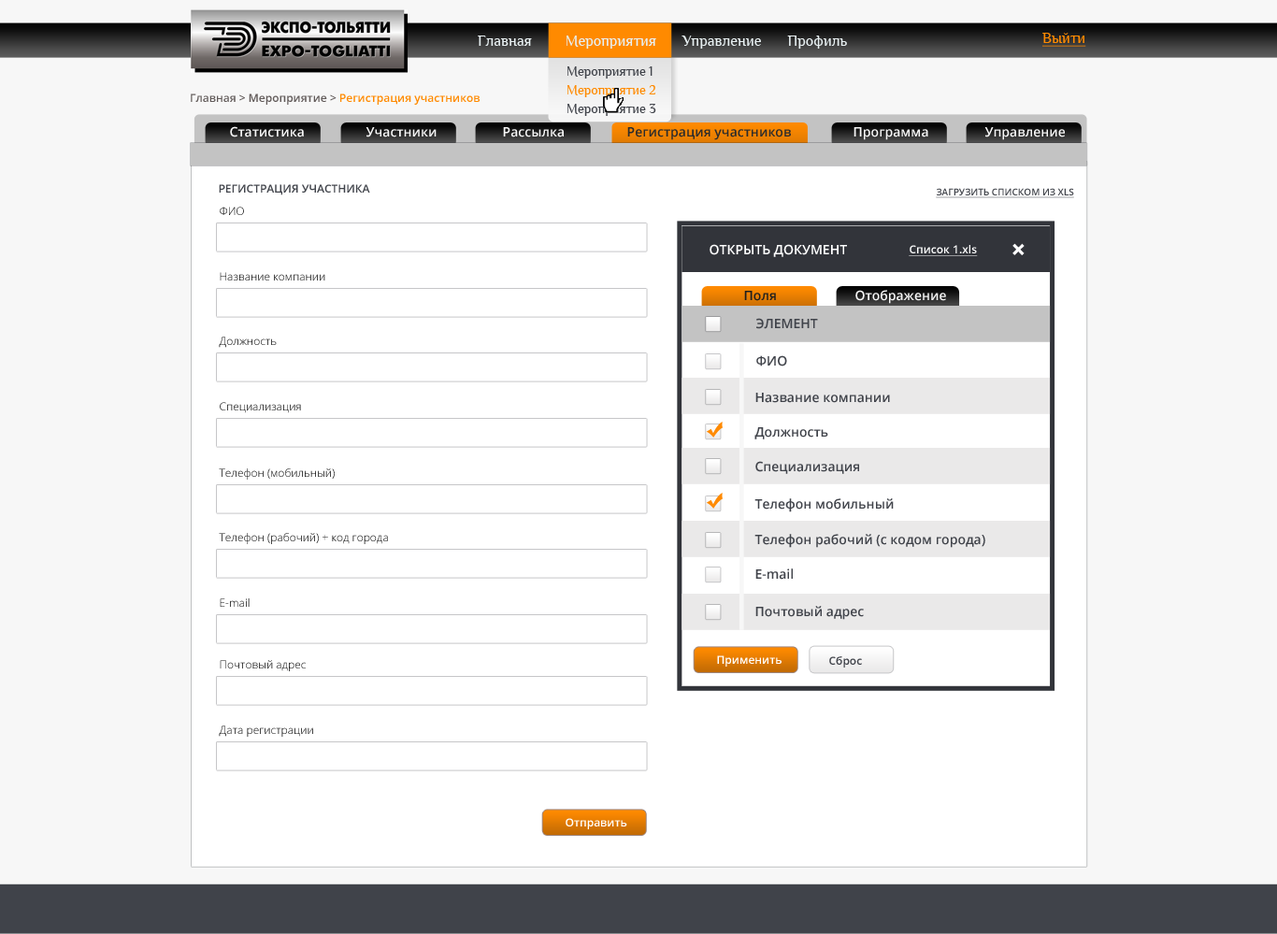
<style>
.page{position:relative;width:1277px;height:934px;background:#ffffff}
.page>*{position:absolute;margin:0}
.t1{font:15.4px "Philosopher";color:#e7eff1}
.t2{font:15px "Philosopher";color:#ff8a00;text-decoration:underline}
.t3{font:13.5px/18.7px "Philosopher";color:#40434a}
.t4{font:13.5px/18.7px "Philosopher";color:#ff8a00}
.t5{font:11.2px "OpenSans-Semibold";color:#615a59}
.t6{font:11.2px "OpenSans-Semibold";color:#ff8a00}
.t7{font:13.1px "OpenSans-Semibold";color:#f7f7f7}
.t8{font:13.1px "OpenSans-Semibold";color:#2c2c2c}
.t9{font:11.2px "OpenSans-Semibold";color:#40434a;text-transform:uppercase}
.t10{font:9.3px "OpenSans-Semibold";color:#40434a;text-transform:uppercase;text-decoration:underline}
.t11{font:11.2px "OpenSans-Light"}
.t12{font:13.1px "OpenSans-Semibold";color:#ffffff;text-transform:uppercase}
.t13{font:11.2px "OpenSans-Semibold";color:#ffffff;text-decoration:underline}
.t14{font:27.8px "OpenSans-Bold";color:#ffffff;text-transform:uppercase}
.t15{font:13.1px "OpenSans-Semibold";color:#1f1f1f}
.t16{font:13.1px "OpenSans-Semibold";color:#40434a}
.t17{font:11.2px "OpenSans-Semibold";color:#ffffff}
.t18{font:11.2px "OpenSans-Semibold";color:#40434a}
</style>
<div class="page">
<p class="t1" style="left:478px;top:36px;width:369px;height:13px">Главная         Мероприятия       Управление       Профиль</p>
<p class="t2" style="left:1042px;top:33px;width:44px;height:14px">Выйти</p>
<p class="t3" style="left:567px;top:66px;width:89px;height:50px">Мероприятие 1<br><span class="t4">Мероприятие 2<br></span>Мероприятие 3</p>
<p class="t5" style="left:191px;top:93px;width:289px;height:12px">Главная &gt; Мероприятие &gt; <span class="t6">Регистрация участников</span></p>
<p class="t7" style="left:230px;top:126px;width:74px;height:11px">Статистика</p>
<p class="t7" style="left:365px;top:127px;width:72px;height:10px">Участники</p>
<p class="t7" style="left:503px;top:127px;width:61px;height:10px">Рассылка</p>
<p class="t8" style="left:627px;top:127px;width:164px;height:13px">Регистрация участников</p>
<p class="t7" style="left:853px;top:127px;width:75px;height:13px">Программа</p>
<p class="t7" style="left:984px;top:127px;width:81px;height:13px">Управление</p>
<p class="t9" style="left:219px;top:184px;width:151px;height:11px">регистрация участника</p>
<p class="t10" style="left:936px;top:188px;width:138px;height:10px">загрузить списком из XLS</p>
<p class="t11" style="left:220px;top:207px;width:24px;height:8px">ФИО</p>
<p class="t12" style="left:709px;top:244px;width:138px;height:13px">открыть документ</p>
<p class="t13" style="left:909px;top:245px;width:69px;height:11px">Cписок 1.xls</p>
<p class="t14" style="left:1012px;top:243px;width:13px;height:12px;rotate:46deg">+</p>
<p class="t11" style="left:220px;top:272px;width:105px;height:8px">Название компании</p>
<p class="t15" style="left:744px;top:291px;width:32px;height:10px">Поля</p>
<p class="t7" style="left:855px;top:290px;width:91px;height:14px">Отображение</p>
<p class="t16" style="left:756px;top:318px;width:62px;height:11px">ЭЛЕМЕНТ</p>
<p class="t11" style="left:219px;top:337px;width:58px;height:11px">Должность</p>
<p class="t16" style="left:756px;top:355px;width:31px;height:11px">ФИО</p>
<p class="t11" style="left:220px;top:402px;width:81px;height:11px">Специализация</p>
<p class="t16" style="left:755px;top:393px;width:135px;height:10px">Название компании</p>
<p class="t16" style="left:754px;top:427px;width:74px;height:12px">Должность</p>
<p class="t16" style="left:755px;top:461px;width:104px;height:13px">Специализация</p>
<p class="t11" style="left:219px;top:468px;width:116px;height:12px">Телефон (мобильный)</p>
<p class="t16" style="left:754px;top:498px;width:140px;height:14px">Телефон мобильный</p>
<p class="t11" style="left:219px;top:533px;width:169px;height:11px">Телефон (рабочий) + код города</p>
<p class="t16" style="left:754px;top:534px;width:231px;height:14px">Телефон рабочий (с кодом города)</p>
<p class="t16" style="left:755px;top:568px;width:38px;height:12px">E-mail</p>
<p class="t11" style="left:220px;top:598px;width:30px;height:9px">E-mail</p>
<p class="t16" style="left:755px;top:606px;width:109px;height:14px">Почтовый адрес</p>
<p class="t11" style="left:220px;top:660px;width:86px;height:11px">Почтовый адрес</p>
<p class="t17" style="left:717px;top:655px;width:64px;height:11px">Применить</p>
<p class="t18" style="left:829px;top:656px;width:33px;height:11px">Сброс</p>
<p class="t11" style="left:219px;top:725px;width:94px;height:12px">Дата регистрации</p>
<p class="t17" style="left:566px;top:818px;width:61px;height:11px">Отправить</p>
</div>
